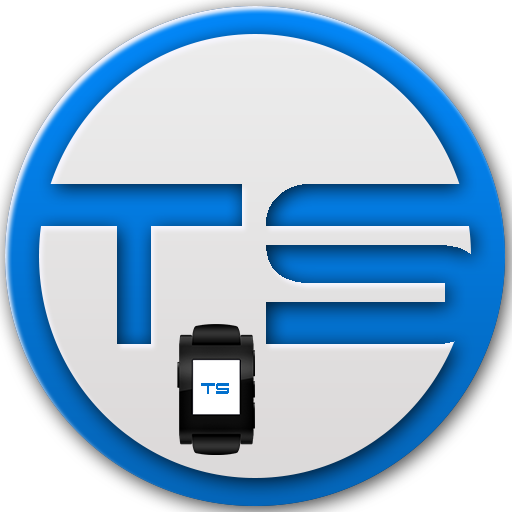
<style>
.page{position:relative;width:512px;height:512px}
.page>*{position:absolute;margin:0}
.t1{font:18px "DodgerCondensed";color:#0270cd}
</style>
<div class="page">
<p class="t1" style="left:201px;top:383px;width:28px;height:11px">TS</p>
</div>
